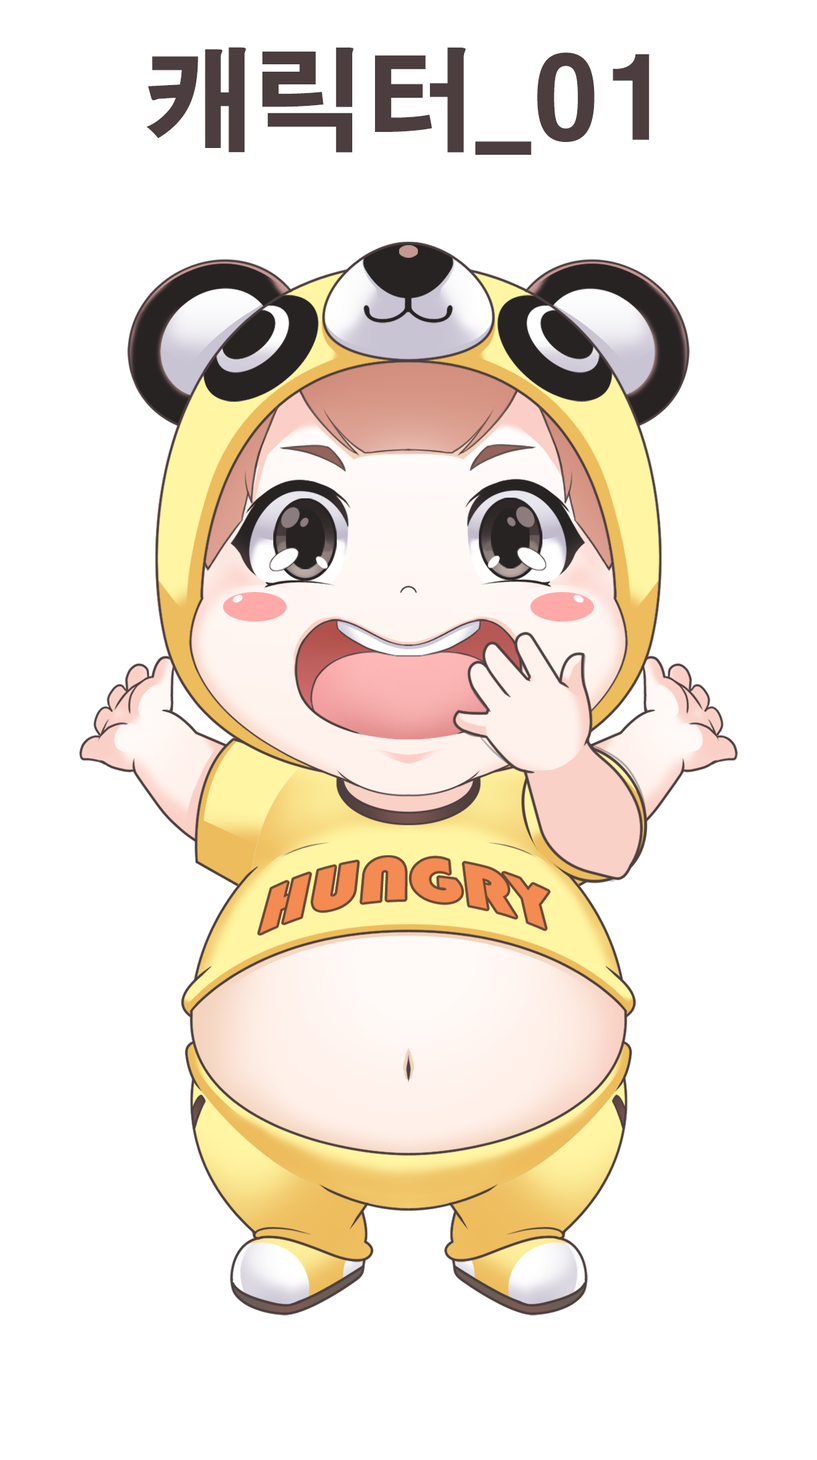
<style>
.page{position:relative;width:817px;height:1460px;background:#ffffff}
.page>*{position:absolute;margin:0}
.t1{font:111.6px "H2gtrE";color:#4c3e3e}
</style>
<div class="page">
<p class="t1" style="left:147px;top:47px;width:503px;height:108px">캐릭터_01</p>
</div>
